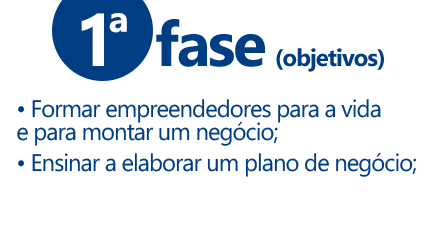
<style>
.page{position:relative;width:428px;height:233px;background:#ffffff}
.page>*{position:absolute;margin:0}
.t1{font:73.5px "SegoeWP-Bold";letter-spacing:-0.04em;color:#ffffff;text-transform:uppercase}
.t2{font:52px "SegoeWP-Bold";letter-spacing:-0.04em;color:#ffffff;text-transform:uppercase}
.t3{font:23.9px "SegoeWP-Bold";letter-spacing:-0.04em;color:#003e83}
.t4{font:62.5px "SegoeWP-Bold";letter-spacing:-0.04em;color:#003e83}
.t5{font:23.9px/31.3px "SegoeWP";letter-spacing:-0.04em;color:#003e83}
.t6{font:23.9px/27.2px "SegoeWP";letter-spacing:-0.04em;color:#003e83}
.t7{font:23.9px/23.1px "SegoeWP";letter-spacing:-0.04em;color:#003e83}
</style>
<div class="page">
<p class="t1" style="left:81px;top:13px;width:46px;height:53px">1<span class="t2">ª</span></p>
<p class="t3" style="left:156px;top:19px;width:228px;height:53px"><span class="t4">fase </span>(objetivos)</p>
<p class="t5" style="left:17px;top:99px;width:400px;height:78px"><span class="t6">• Formar empreendedores para a vida <br></span><span class="t7">e para montar um negócio;<br></span>• Ensinar a elaborar um plano de negócio;</p>
</div>
